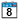
<style>
.page{position:relative;width:19px;height:19px;background:#ffffff}
.page>*{position:absolute;margin:0}
.t1{font:11.1px "Arial-BoldMT";color:#000000}
</style>
<div class="page">
<p class="t1" style="left:6px;top:8px;width:6px;height:8px">8</p>
</div>
